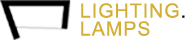
<style>
.page{position:relative;width:190px;height:40px;background:#ffffff}
.page>*{position:absolute;margin:0}
.t1{font:19.6px/18px "ArialMT";letter-spacing:0.05em;color:#d4af37;text-transform:uppercase}
.t2{font:19.6px/18px "ArialMT";letter-spacing:0.05em;color:#000000;text-transform:uppercase}
</style>
<div class="page">
<p class="t1" style="left:81px;top:3px;width:104px;height:33px">Lighting<span class="t2">.<br></span>Lamps</p>
</div>
